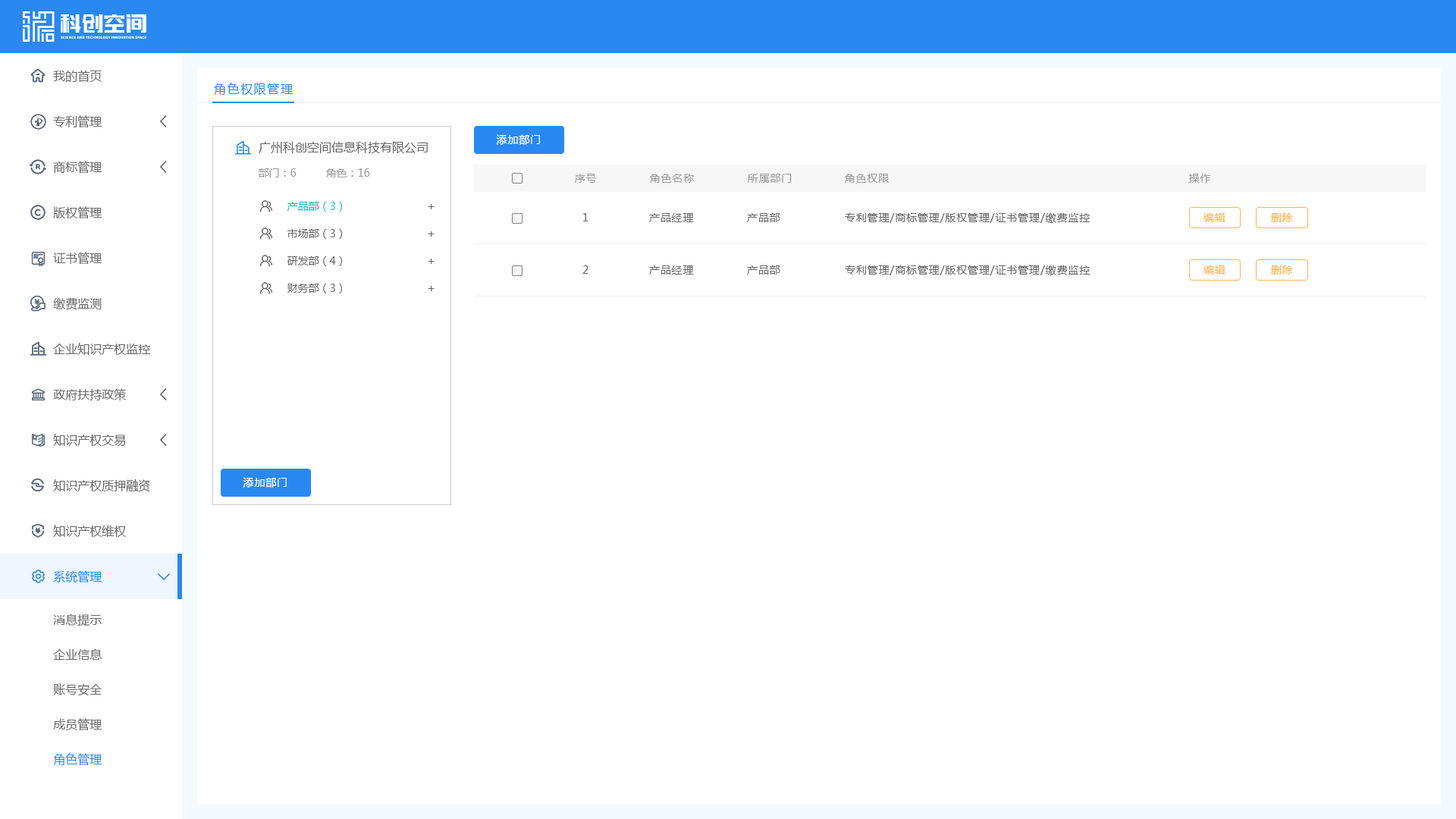
<style>
.page{position:relative;width:1456px;height:819px;background:#ffffff}
.page>*{position:absolute;margin:0}
.t1{font:12.1px "MicrosoftYaHei";color:#666666}
.t2{font:12.1px "MicrosoftYaHei";letter-spacing:0.1em;color:#2988f2}
.t3{font:10.6px "MicrosoftYaHei";letter-spacing:0.06em;color:#ffffff}
.t4{font:10.6px "MicrosoftYaHei";color:#999999}
.t5{font:10.6px "MicrosoftYaHei";letter-spacing:0.06em;color:#999999}
.t6{font:10.6px "MicrosoftYaHei";color:#04bbc2}
.t7{font:10.6px "MicrosoftYaHei";letter-spacing:0.06em;color:#666666}
.t8{font:10.6px "MicrosoftYaHei";letter-spacing:0.06em;color:#f8b551}
.t9{font:10.6px "MicrosoftYaHei";color:#666666}
.t10{font:12.1px "MicrosoftYaHei";color:#2988f2}
</style>
<div class="page">
<p class="t1" style="left:53px;top:70px;width:49px;height:13px">我的首页</p>
<p class="t2" style="left:214px;top:83px;width:79px;height:12px">角色权限管理</p>
<p class="t1" style="left:53px;top:115px;width:49px;height:13px">专利管理</p>
<p class="t3" style="left:496px;top:134px;width:44px;height:11px">添加部门</p>
<p class="t1" style="left:259px;top:142px;width:169px;height:11px">广州科创空间信息科技有限公司</p>
<p class="t1" style="left:53px;top:161px;width:49px;height:13px">商标管理</p>
<p class="t4" style="left:258px;top:168px;width:39px;height:9px">部门：6</p>
<p class="t4" style="left:326px;top:168px;width:44px;height:9px">角色：16</p>
<p class="t5" style="left:575px;top:174px;width:22px;height:9px">序号</p>
<p class="t5" style="left:650px;top:174px;width:45px;height:9px">角色名称</p>
<p class="t5" style="left:748px;top:174px;width:44px;height:9px">所属部门</p>
<p class="t5" style="left:845px;top:174px;width:44px;height:9px">角色权限</p>
<p class="t5" style="left:1188px;top:174px;width:23px;height:9px">操作</p>
<p class="t1" style="left:53px;top:206px;width:49px;height:13px">版权管理</p>
<p class="t6" style="left:287px;top:202px;width:55px;height:10px">产品部（3）</p>
<p class="t1" style="left:428px;top:204px;width:7px;height:5px">+</p>
<p class="t7" style="left:583px;top:213px;width:5px;height:8px">1</p>
<p class="t7" style="left:649px;top:213px;width:45px;height:9px">产品经理</p>
<p class="t7" style="left:747px;top:213px;width:33px;height:9px">产品部</p>
<p class="t7" style="left:845px;top:213px;width:245px;height:10px">专利管理/商标管理/版权管理/证书管理/缴费监控</p>
<p class="t8" style="left:1203px;top:213px;width:22px;height:9px">编辑</p>
<p class="t8" style="left:1271px;top:213px;width:22px;height:9px">删除</p>
<p class="t9" style="left:287px;top:229px;width:55px;height:10px">市场部（3）</p>
<p class="t1" style="left:428px;top:231px;width:7px;height:6px">+</p>
<p class="t1" style="left:53px;top:252px;width:49px;height:13px">证书管理</p>
<p class="t9" style="left:287px;top:256px;width:55px;height:10px">研发部（4）</p>
<p class="t1" style="left:428px;top:259px;width:7px;height:5px">+</p>
<p class="t7" style="left:582px;top:265px;width:6px;height:9px">2</p>
<p class="t7" style="left:649px;top:265px;width:45px;height:10px">产品经理</p>
<p class="t7" style="left:747px;top:265px;width:33px;height:10px">产品部</p>
<p class="t7" style="left:845px;top:265px;width:245px;height:10px">专利管理/商标管理/版权管理/证书管理/缴费监控</p>
<p class="t8" style="left:1203px;top:265px;width:22px;height:10px">编辑</p>
<p class="t8" style="left:1271px;top:265px;width:22px;height:10px">删除</p>
<p class="t9" style="left:287px;top:284px;width:55px;height:9px">财务部（3）</p>
<p class="t1" style="left:428px;top:286px;width:7px;height:5px">+</p>
<p class="t1" style="left:53px;top:297px;width:49px;height:13px">缴费监测</p>
<p class="t1" style="left:53px;top:343px;width:98px;height:12px">企业知识产权监控</p>
<p class="t1" style="left:53px;top:388px;width:73px;height:13px">政府扶持政策</p>
<p class="t1" style="left:53px;top:434px;width:73px;height:13px">知识产权交易</p>
<p class="t1" style="left:53px;top:479px;width:97px;height:13px">知识产权质押融资</p>
<p class="t3" style="left:243px;top:477px;width:44px;height:11px">添加部门</p>
<p class="t1" style="left:53px;top:525px;width:74px;height:13px">知识产权维权</p>
<p class="t10" style="left:53px;top:570px;width:49px;height:13px">系统管理</p>
<p class="t1" style="left:53px;top:613px;width:49px;height:13px">消息提示</p>
<p class="t1" style="left:53px;top:648px;width:49px;height:12px">企业信息</p>
<p class="t1" style="left:53px;top:683px;width:49px;height:12px">账号安全</p>
<p class="t1" style="left:53px;top:718px;width:49px;height:13px">成员管理</p>
<p class="t10" style="left:53px;top:753px;width:49px;height:13px">角色管理</p>
</div>
